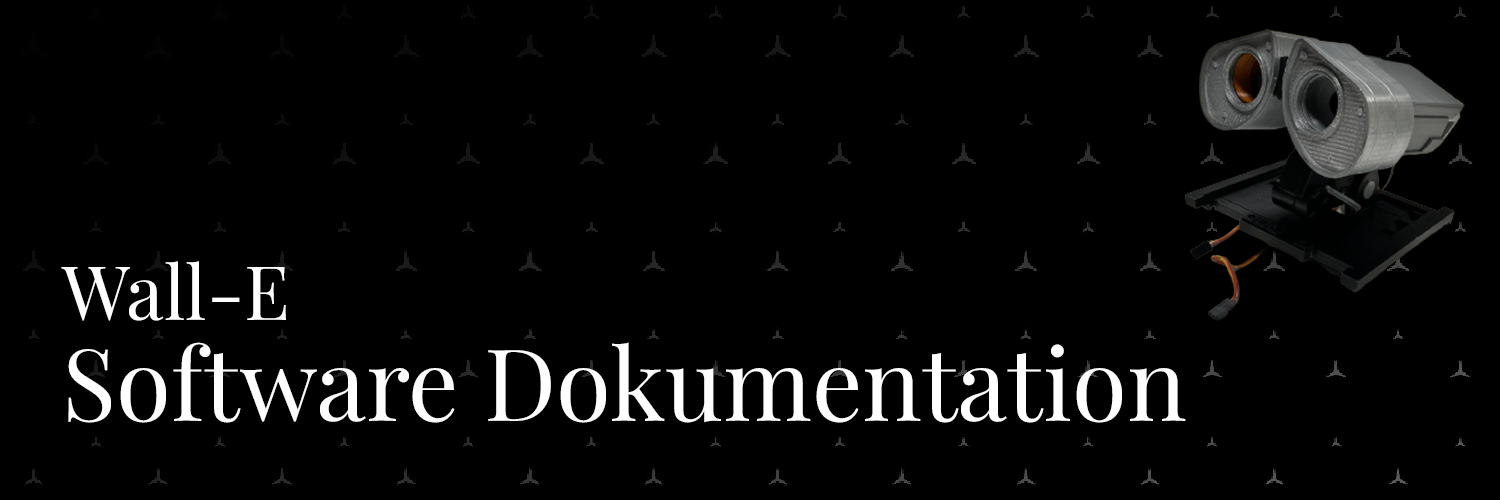
<style>
.page{position:relative;width:1500px;height:500px;background:#000000}
.page>*{position:absolute;margin:0}
.t1{font:75px "PlayfairDisplay-Regular";color:#ffffff}
.t2{font:100px "PlayfairDisplay-Regular";color:#ffffff}
</style>
<div class="page">
<p class="t1" style="left:61px;top:261px;width:225px;height:60px">Wall-E</p>
<p class="t2" style="left:68px;top:342px;width:1118px;height:81px">Software Dokumentation</p>
</div>
